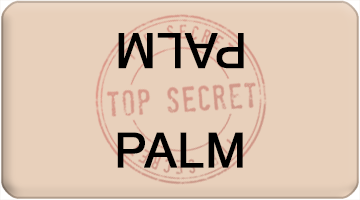
<style>
.page{position:relative;width:360px;height:200px;background:#e8d0bb}
.page>*{position:absolute;margin:0}
.t1{font:48px "ArialMT";color:#000000;font-weight:bold}
</style>
<div class="page">
<p class="t1" style="left:118px;top:33px;width:126px;height:36px;rotate:180deg">PALM</p>
<p class="t1" style="left:117px;top:132px;width:126px;height:36px">PALM</p>
</div>
